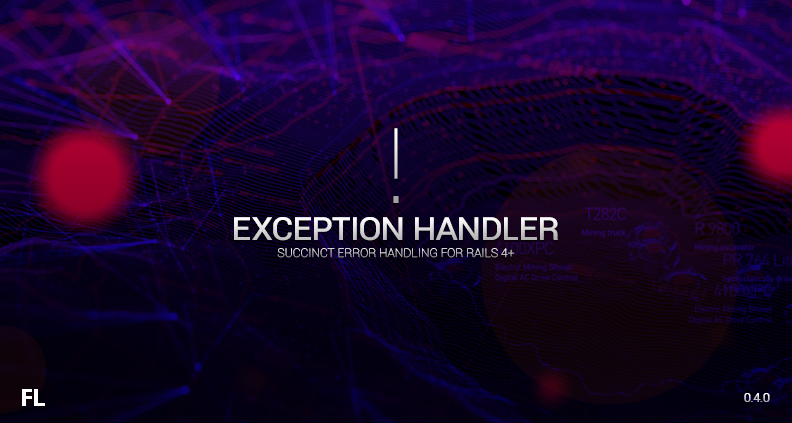
<style>
.page{position:relative;width:792px;height:423px}
.page>*{position:absolute;margin:0}
.t1{font:105px "Roboto-Thin";letter-spacing:-0.05em;font-variant:small-caps}
.t2{font:40px "Roboto-Regular";letter-spacing:-0.05em;font-variant:small-caps}
.t3{font:12px "Roboto-Thin";text-transform:uppercase}
.t4{font:25px "MyriadPro-Bold";letter-spacing:-0.05em;color:#ffffff;font-variant:small-caps}
.t5{font:13px "Roboto-Regular";letter-spacing:-0.05em;text-transform:uppercase}
</style>
<div class="page">
<p class="t1" style="left:393px;top:128px;width:6px;height:75px">!</p>
<p class="t2" style="left:234px;top:217px;width:324px;height:24px">exception handler</p>
<p class="t3" style="left:277px;top:248px;width:238px;height:10px">succinct error handling for rails 4+</p>
<p class="t4" style="left:22px;top:389px;width:23px;height:17px">FL</p>
<p class="t5" style="left:744px;top:393px;width:26px;height:9px">0.4.0</p>
</div>
